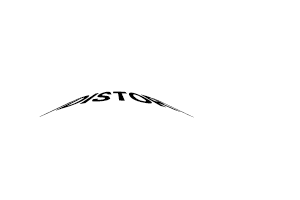
<style>
.page{position:relative;width:300px;height:200px;background:#ffffff}
.page>*{position:absolute;margin:0}
.t1{font:28px "Roboto-Bold";color:#000000}
</style>
<div class="page">
<p class="t1" style="left:39px;top:91px;width:155px;height:27px">VDISTORT</p>
</div>
